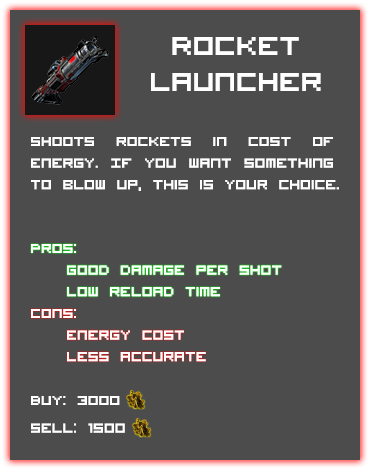
<style>
.page{position:relative;width:370px;height:470px;background:#4c4c4c}
.page>*{position:absolute;margin:0}
.t1{font:36px/12px "VisitorTT1BRK";color:#ffffff}
.t2{font:18px "VisitorTT1BRK";color:#ffffff}
</style>
<div class="page">
<p class="t1" style="left:151px;top:37px;width:170px;height:54px;text-align:center">Rocket <br><br><br>Launcher</p>
<p class="t2" style="left:31px;top:137px;width:308px;height:54px;text-align:justify">Shoots rockets in cost of energy. If you want something to blow up, this is your choice.</p>
<p class="t2" style="left:31px;top:244px;width:251px;height:53px;text-align:justify">Pros:<br> Good damage per shot<br> low reload time</p>
<p class="t2" style="left:31px;top:309px;width:175px;height:53px;text-align:justify">Cons:<br> Energy cost<br> less accurate</p>
<p class="t2" style="left:31px;top:396px;width:94px;height:37px">Buy: 3000 <br><br>Sell: 1500</p>
</div>
